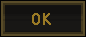
<style>
.page{position:relative;width:86px;height:37px;background:#181715}
.page>*{position:absolute;margin:0}
.t1{font:30px "Terminal";letter-spacing:0.01em;color:#9a7a25}
</style>
<div class="page">
<p class="t1" style="left:32px;top:13px;width:19px;height:12px">OK</p>
</div>
